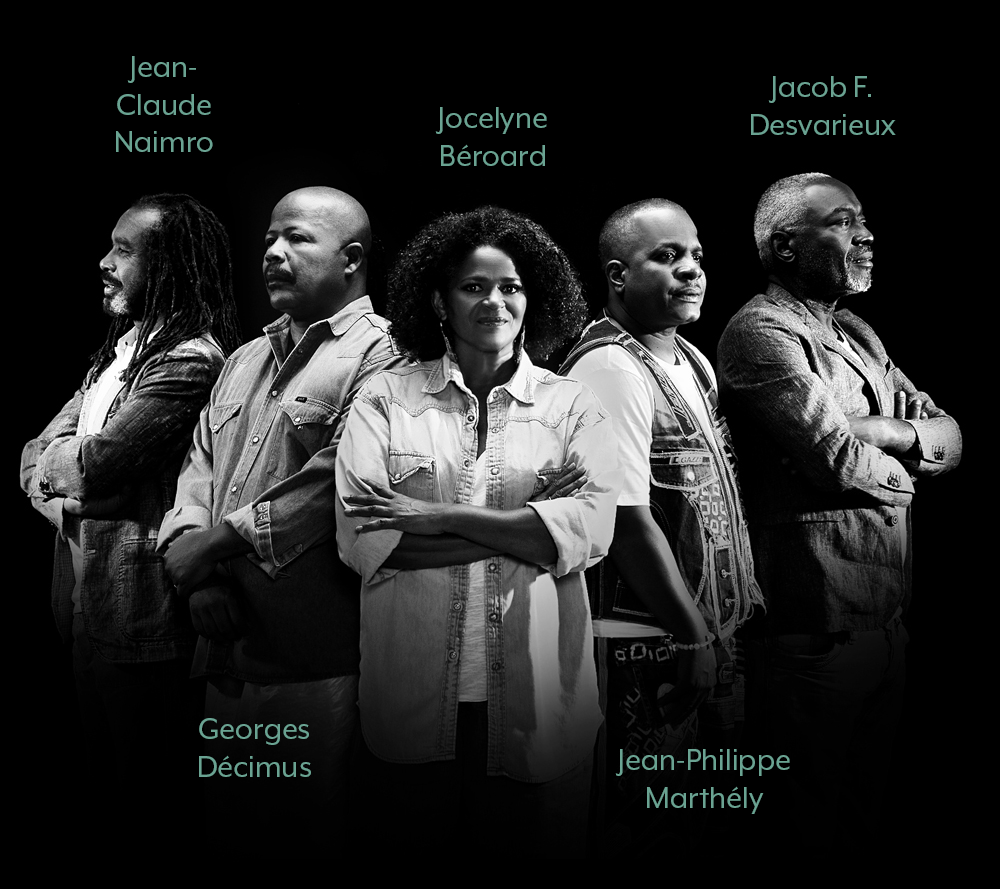
<style>
.page{position:relative;width:1000px;height:889px;background:#000000}
.page>*{position:absolute;margin:0}
.t1{font:33.3px/37.5px "MrEavesXLModOT-Reg";color:#6aa392}
</style>
<div class="page">
<p class="t1" style="left:116px;top:56px;width:97px;height:96px;text-align:center">jean-<br>Claude Naimro</p>
<p class="t1" style="left:751px;top:76px;width:145px;height:59px;text-align:center">Jacob F. Desvarieux</p>
<p class="t1" style="left:435px;top:107px;width:112px;height:59px;text-align:center">Jocelyne Béroard</p>
<p class="t1" style="left:199px;top:718px;width:112px;height:59px;text-align:center">Georges Décimus</p>
<p class="t1" style="left:615px;top:749px;width:175px;height:65px;text-align:center">Jean-Philippe Marthély</p>
</div>
